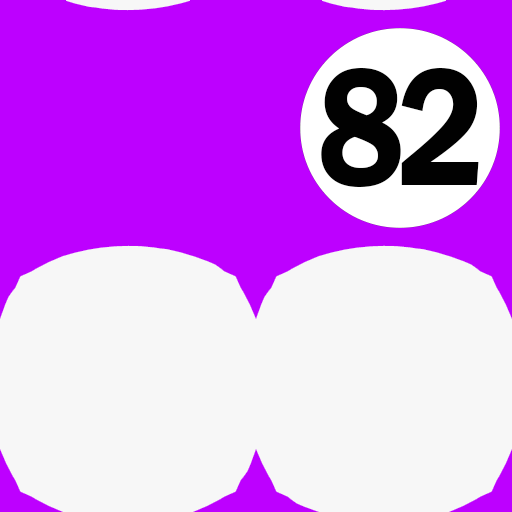
<style>
.page{position:relative;width:512px;height:512px;background:#f7f7f7}
.page>*{position:absolute;margin:0}
.t1{font:172.5px "FranklinGothic-Demi";letter-spacing:-0.05em;color:#010101;scale:0.87 1}
</style>
<div class="page">
<p class="t1" style="left:321px;top:68px;width:158px;height:119px">82</p>
</div>
